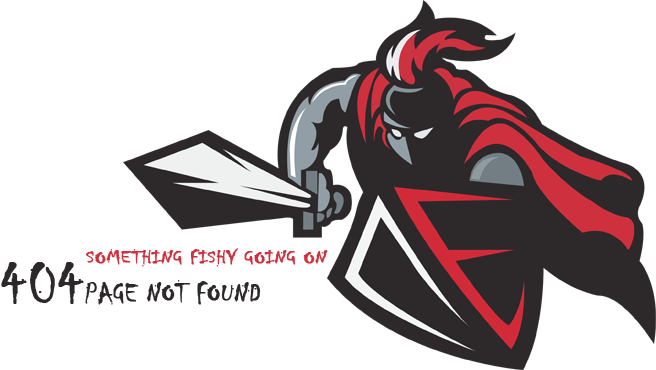
<style>
.page{position:relative;width:656px;height:370px;background:#ffffff}
.page>*{position:absolute;margin:0}
.t1{font:19px "Chiller-Regular";color:#cf303e;font-weight:bold;scale:1.25 1}
.t2{font:29px "Chiller-Regular";color:#2d292b;font-weight:bold}
.t3{font:60px "Chiller-Regular";color:#2d292b;font-weight:bold}
</style>
<div class="page">
<p class="t1" style="left:86px;top:248px;width:242px;height:19px">SOMETHING FISHY GOING ON</p>
<p class="t2" style="left:1px;top:262px;width:260px;height:43px"><span class="t3">404</span>PAGE NOT FOUND</p>
</div>
